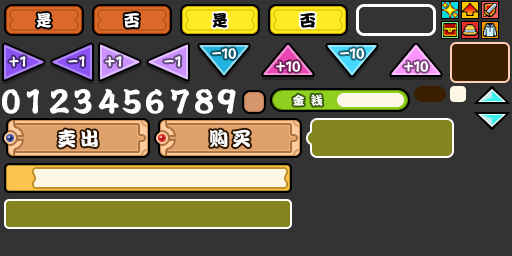
<style>
.page{position:relative;width:512px;height:256px;background:#333333}
.page>*{position:absolute;margin:0}
.t1{font:16px "DFPKanTingLiuW9";letter-spacing:-0.1em;color:#ffffff}
.t2{font:16px "DFPKanTingLiuW9";letter-spacing:-0.1em;color:#000000}
.t3{font:12px "DFPKanTingLiuW9";letter-spacing:0.1em;color:#ffffff}
.t4{font:19px "DFPKanTingLiuW9";letter-spacing:0.2em;color:#ffffff}
</style>
<div class="page">
<p class="t1" style="left:36px;top:13px;width:15px;height:15px">是</p>
<p class="t1" style="left:124px;top:13px;width:15px;height:15px">否</p>
<p class="t2" style="left:212px;top:13px;width:15px;height:15px">是</p>
<p class="t2" style="left:300px;top:13px;width:15px;height:15px">否</p>
<p class="t3" style="left:293px;top:94px;width:30px;height:12px">金 钱</p>
<p class="t4" style="left:58px;top:129px;width:40px;height:19px">卖出</p>
<p class="t4" style="left:210px;top:129px;width:40px;height:18px">购买</p>
</div>
